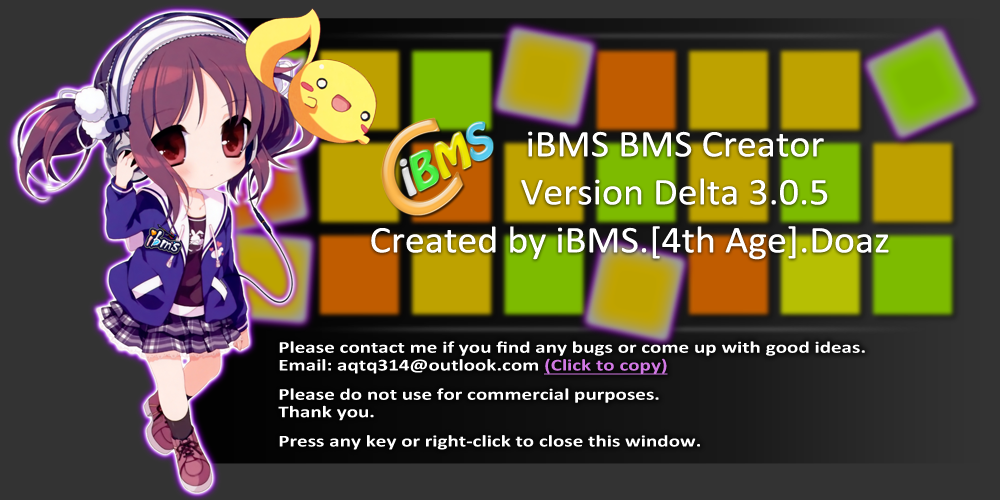
<style>
.page{position:relative;width:1000px;height:500px}
.page>*{position:absolute;margin:0}
.t1{font:38px "Calibri";color:#ffffff;scale:1.05 1}
.t2{font:16.7px/17.6px "Calibri-Bold";color:#ffffff;scale:1.26 1}
.t3{font:16.7px/17.6px "Calibri-Bold";color:#d178e4;text-decoration:underline;scale:1.26 1}
.t4{font:16.7px/14.6px "Calibri-Bold";color:#ffffff;scale:1.26 1}
.t5{font:16.7px/11.7px "Calibri-Bold";color:#ffffff;scale:1.26 1}
</style>
<div class="page">
<p class="t1" style="left:371px;top:131px;width:518px;height:129px;text-align:center">iBMS BMS Creator<br>          Version Delta 3.0.5<br>Created by iBMS.[4th Age].Doaz</p>
<p class="t2" style="left:278px;top:341px;width:587px;height:109px">Please contact me if you find any bugs or come up with good ideas.<br>Email: aqtq314@outlook.com <span class="t3">(Click to copy)<br></span><span class="t4"><br>Please d</span><span class="t5">o not use for commercial purposes.<br></span>Thank you.<br><span class="t5"><br>P</span>ress any key or right-click to close this window.</p>
</div>
